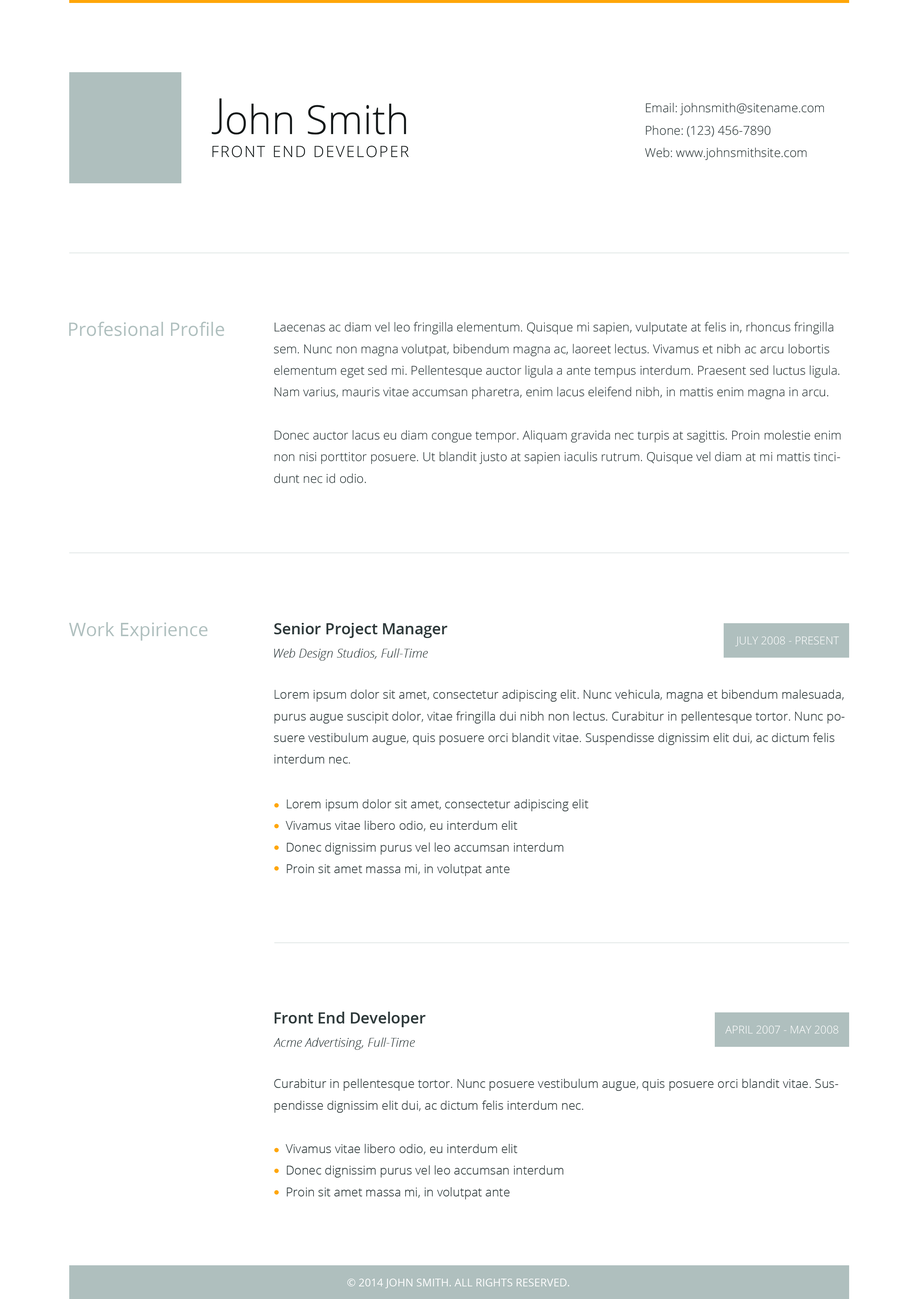
<style>
.page{position:relative;width:918px;height:1299px;background:#ffffff}
.page>*{position:absolute;margin:0}
.t1{font:40.1px "OpenSans-Light";color:#141819}
.t2{font:12.3px/22.4px "OpenSans-Light";color:#303a3c}
.t3{font:12.3px/22.4px "OpenSans-Light";color:#303a3c;text-transform:uppercase}
.t4{font:15.4px "OpenSans-Light";letter-spacing:0.1em;color:#141819}
.t5{font:18.5px "OpenSans";color:#afbfbe}
.t6{font:12.3px/21.6px "OpenSans-Light";color:#303a3c}
.t7{font:15.4px "OpenSans-Semibold";color:#303a3c}
.t8{font:10.8px "OpenSans-Light";color:#ffffff;text-transform:uppercase}
.t9{font:12.3px "OpenSansLight-Italic";color:#303a3c}
.t10{font:10.8px "OpenSans";color:#ffffff;text-transform:uppercase}
</style>
<div class="page">
<p class="t1" style="left:212px;top:98px;width:10px;height:36px">J</p>
<p class="t1" style="left:227px;top:103px;width:179px;height:32px">ohn Smith</p>
<p class="t2" style="left:645px;top:103px;width:179px;height:57px"><span class="t3">e</span>mail: johnsmith@sitename.com<br>Phone: (123) 456-7890<br>Web: www.johnsmithsite.com</p>
<p class="t4" style="left:213px;top:145px;width:196px;height:12px">FRONT END DEVELOPER</p>
<p class="t5" style="left:69px;top:321px;width:155px;height:15px">Profesional Profile</p>
<p class="t6" style="left:274px;top:322px;width:567px;height:161px">Laecenas ac diam vel leo fringilla elementum. Quisque mi sapien, vulputate at felis in, rhoncus fringilla sem. Nunc non magna volutpat, bibendum magna ac, laoreet lectus. Vivamus et nibh ac arcu lobortis elementum eget sed mi. Pellentesque auctor ligula a ante tempus interdum. Praesent sed luctus ligula. Nam varius, mauris vitae accumsan pharetra, enim lacus eleifend nibh, in mattis enim magna in arcu. <br><br>Donec auctor lacus eu diam congue tempor. Aliquam gravida nec turpis at sagittis. Proin molestie enim non nisi porttitor posuere. Ut blandit justo at sapien iaculis rutrum. Quisque vel diam at mi mattis tincidunt nec id odio.</p>
<p class="t5" style="left:69px;top:622px;width:139px;height:18px">Work Expirience</p>
<p class="t7" style="left:274px;top:623px;width:174px;height:15px">Senior Project Manager</p>
<p class="t8" style="left:735px;top:636px;width:104px;height:10px">July 2008 - Present</p>
<p class="t9" style="left:274px;top:648px;width:154px;height:12px">Web Design Studios, Full-Time</p>
<p class="t6" style="left:274px;top:689px;width:571px;height:74px">Lorem ipsum dolor sit amet, consectetur adipiscing elit. Nunc vehicula, magna et bibendum malesuada, purus augue suscipit dolor, vitae fringilla dui nibh non lectus. Curabitur in pellentesque tortor. Nunc posuere vestibulum augue, quis posuere orci blandit vitae. Suspendisse dignissim elit dui, ac dictum felis interdum nec.</p>
<p class="t6" style="left:286px;top:799px;width:303px;height:77px">Lorem ipsum dolor sit amet, consectetur adipiscing elit<br>    Vivamus vitae libero odio, eu interdum elit<br>    Donec dignissim purus vel leo accumsan interdum<br>    Proin sit amet massa mi, in volutpat ante</p>
<p class="t7" style="left:275px;top:1011px;width:151px;height:16px">Front End Developer</p>
<p class="t8" style="left:725px;top:1025px;width:114px;height:9px">april 2007 - may 2008</p>
<p class="t9" style="left:274px;top:1037px;width:141px;height:13px">Acme Advertising, Full-Time</p>
<p class="t6" style="left:274px;top:1078px;width:565px;height:35px">Curabitur in pellentesque tortor. Nunc posuere vestibulum augue, quis posuere orci blandit vitae. Suspendisse dignissim elit dui, ac dictum felis interdum nec.</p>
<p class="t6" style="left:286px;top:1144px;width:277px;height:55px">Vivamus vitae libero odio, eu interdum elit<br>    Donec dignissim purus vel leo accumsan interdum<br>    Proin sit amet massa mi, in volutpat ante</p>
<p class="t10" style="left:347px;top:1278px;width:222px;height:10px">© 2014 John Smith. All rights reserved.</p>
</div>
